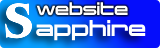
<style>
.page{position:relative;width:160px;height:48px}
.page>*{position:absolute;margin:0}
.t1{font:47px "OPTIBrianJamesBoldCond";color:#ffffff}
.t2{font:16.7px "ChangelingNeoW02-Bold";color:#ffffff}
.t3{font:21px "ChangelingNeoW02-Bold";color:#ffffff}
</style>
<div class="page">
<p class="t1" style="left:5px;top:3px;width:27px;height:36px">S</p>
<p class="t2" style="left:36px;top:2px;width:92px;height:14px">Website</p>
<p class="t3" style="left:36px;top:20px;width:110px;height:21px">apphire</p>
</div>
